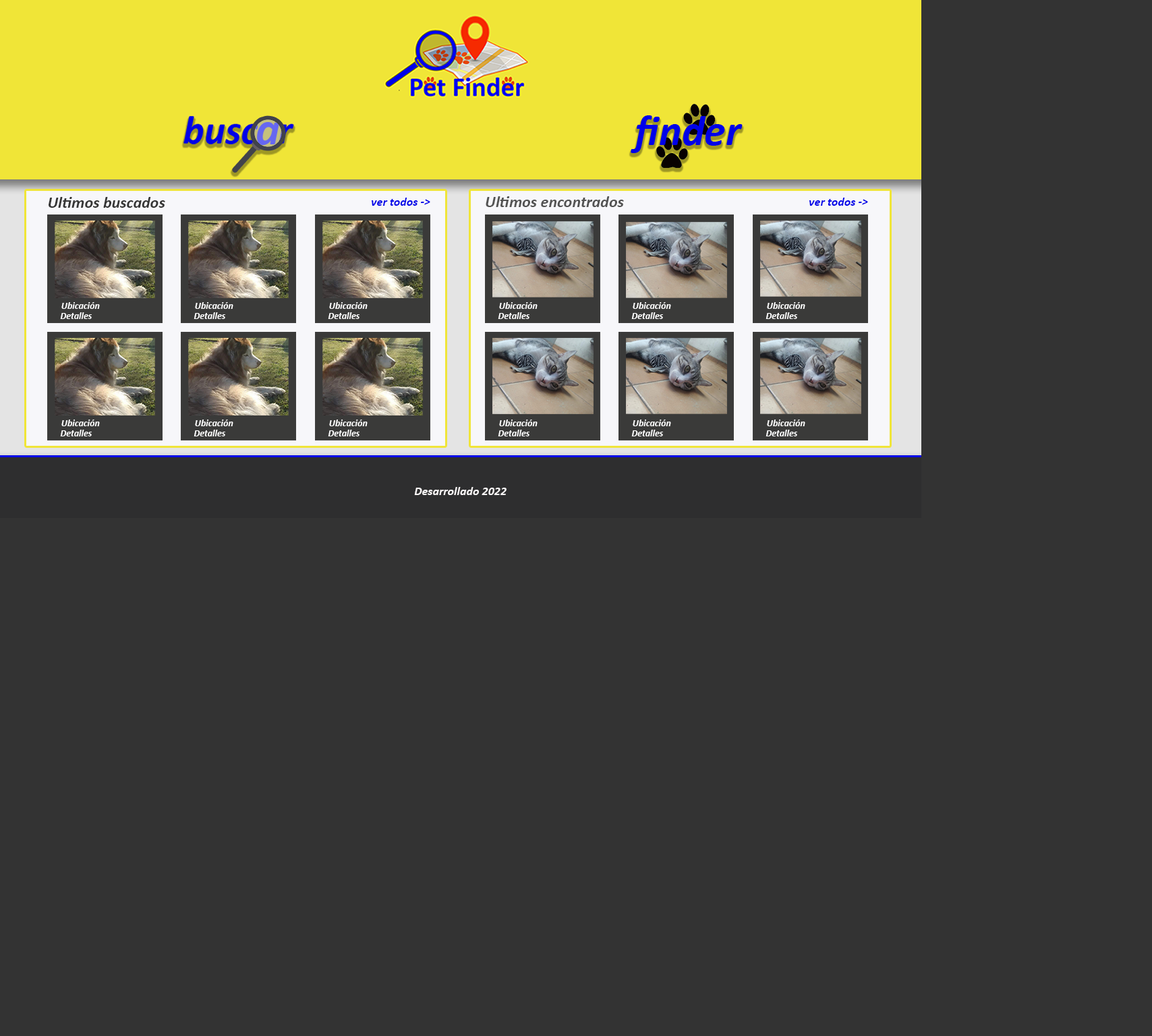
<style>
.page{position:relative;width:1152px;height:1036px;background:#333333}
.page>*{position:absolute;margin:0}
.t1{font:43.2px "Calibri-BoldItalic";color:#0002e8}
.t2{font:16.2px "Calibri-BoldItalic";color:#353535}
.t3{font:12.1px "Calibri-BoldItalic";color:#0002e8}
.t4{font:16.2px "Calibri-BoldItalic";color:#535353}
.t5{font:9.4px "Calibri-BoldItalic";color:#fcfcfc}
.t6{font:12.1px "Calibri-BoldItalic";color:#faf7f7}
</style>
<div class="page">
<p class="t1" style="left:630px;top:115px;width:112px;height:38px">finder</p>
<p class="t2" style="left:49px;top:197px;width:116px;height:11px">Ultimos buscados</p>
<p class="t3" style="left:371px;top:198px;width:59px;height:8px">ver todos -&gt;</p>
<p class="t4" style="left:485px;top:196px;width:139px;height:11px">Ultimos encontrados</p>
<p class="t3" style="left:809px;top:198px;width:59px;height:8px">ver todos -&gt;</p>
<p class="t5" style="left:61px;top:302px;width:39px;height:7px">Ubicación</p>
<p class="t5" style="left:195px;top:302px;width:38px;height:7px">Ubicación</p>
<p class="t5" style="left:329px;top:302px;width:38px;height:7px">Ubicación</p>
<p class="t5" style="left:499px;top:302px;width:38px;height:7px">Ubicación</p>
<p class="t5" style="left:632px;top:302px;width:39px;height:7px">Ubicación</p>
<p class="t5" style="left:767px;top:302px;width:38px;height:7px">Ubicación</p>
<p class="t5" style="left:60px;top:312px;width:32px;height:7px">Detalles</p>
<p class="t5" style="left:193px;top:312px;width:32px;height:7px">Detalles</p>
<p class="t5" style="left:328px;top:312px;width:31px;height:7px">Detalles</p>
<p class="t5" style="left:498px;top:312px;width:31px;height:7px">Detalles</p>
<p class="t5" style="left:631px;top:312px;width:32px;height:7px">Detalles</p>
<p class="t5" style="left:765px;top:312px;width:32px;height:7px">Detalles</p>
<p class="t5" style="left:61px;top:419px;width:39px;height:7px">Ubicación</p>
<p class="t5" style="left:195px;top:419px;width:38px;height:7px">Ubicación</p>
<p class="t5" style="left:329px;top:419px;width:38px;height:7px">Ubicación</p>
<p class="t5" style="left:499px;top:419px;width:38px;height:7px">Ubicación</p>
<p class="t5" style="left:632px;top:419px;width:39px;height:7px">Ubicación</p>
<p class="t5" style="left:767px;top:419px;width:38px;height:7px">Ubicación</p>
<p class="t5" style="left:60px;top:429px;width:32px;height:7px">Detalles</p>
<p class="t5" style="left:193px;top:429px;width:32px;height:7px">Detalles</p>
<p class="t5" style="left:328px;top:429px;width:31px;height:7px">Detalles</p>
<p class="t5" style="left:498px;top:429px;width:31px;height:7px">Detalles</p>
<p class="t5" style="left:631px;top:429px;width:32px;height:7px">Detalles</p>
<p class="t5" style="left:765px;top:429px;width:32px;height:7px">Detalles</p>
<p class="t6" style="left:414px;top:487px;width:92px;height:8px">Desarrollado 2022</p>
</div>
